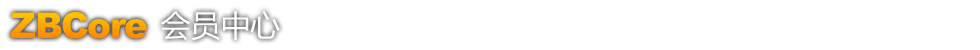
<style>
.page{position:relative;width:980px;height:50px;background:#ffffff}
.page>*{position:absolute;margin:0}
.t1{font:35.8px "Arial-Black";letter-spacing:-0.04em}
.t2{font:30px "MicrosoftYaHei";color:#ffffff}
</style>
<div class="page">
<p class="t1" style="left:10px;top:12px;width:137px;height:27px">ZBCore</p>
<p class="t2" style="left:160px;top:10px;width:120px;height:31px">会员中心</p>
</div>
